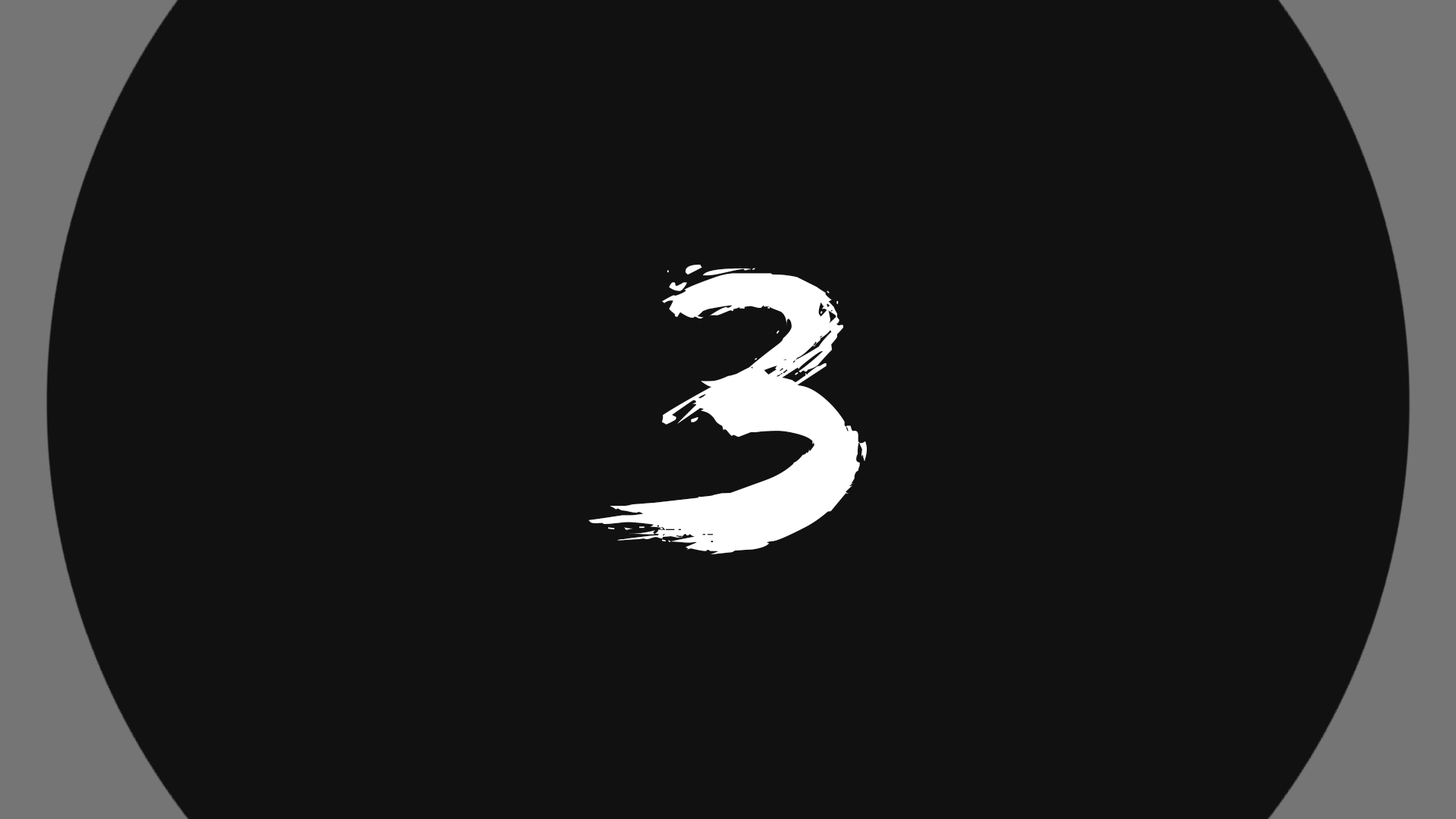
<style>
.page{position:relative;width:1456px;height:819px;background:#111111}
.page>*{position:absolute;margin:0}
.t1{font:379.2px "LeviReBrushed";letter-spacing:0.15em;color:#ffffff}
</style>
<div class="page">
<p class="t1" style="left:588px;top:265px;width:279px;height:289px">3</p>
</div>
